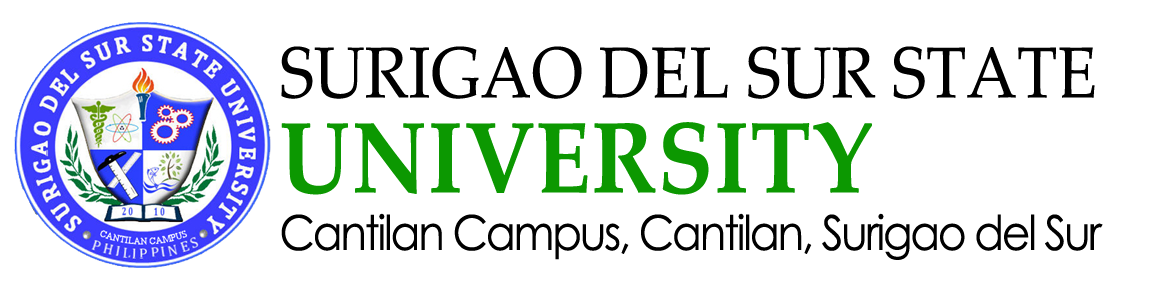
<style>
.page{position:relative;width:1176px;height:293px;background:#ffffff}
.page>*{position:absolute;margin:0}
.t1{font:48px "CenturyGothic";letter-spacing:-0.05em;color:#000000;scale:0.91 1}
.t2{font:72px/95px "PalatinoLinotype-Roman";color:#000000;scale:0.91 1}
.t3{font:100px/95px "PalatinoLinotype-Bold";letter-spacing:0.01em;color:#0c9801;scale:0.91 1}
</style>
<div class="page">
<p class="t1" style="left:281px;top:46px;width:822px;height:214px"><span class="t2">SURIGAO DEL SUR STATE <br></span><span class="t3">UNIVERSITY<br></span>Cantilan Campus, Cantilan, Surigao del Sur</p>
</div>
